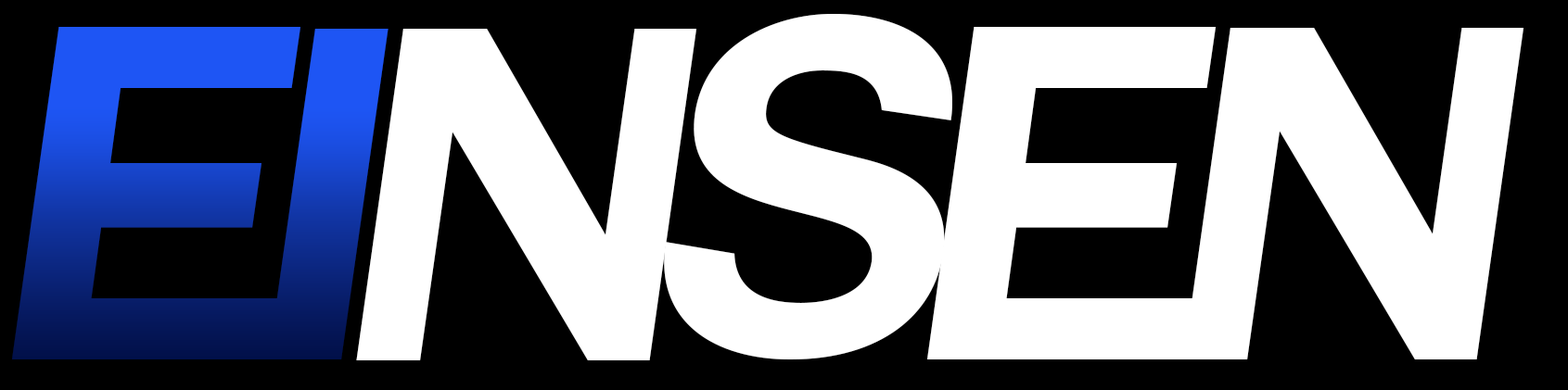
<style>
.page{position:relative;width:1568px;height:390px;background:#000000}
.page>*{position:absolute;margin:0}
.t1{font:463.6px "Couture-BoldItalic";color:#ffffff}
.t2{font:463.6px "Couture-BoldItalic"}
</style>
<div class="page">
<p class="t1" style="left:664px;top:14px;width:288px;height:346px">s</p>
<p class="t2" style="left:12px;top:27px;width:288px;height:333px">e</p>
<p class="t2" style="left:268px;top:29px;width:121px;height:331px">i</p>
<p class="t1" style="left:356px;top:29px;width:340px;height:332px">n</p>
<p class="t1" style="left:927px;top:27px;width:289px;height:333px">e</p>
<p class="t1" style="left:1183px;top:28px;width:340px;height:332px">n</p>
</div>
